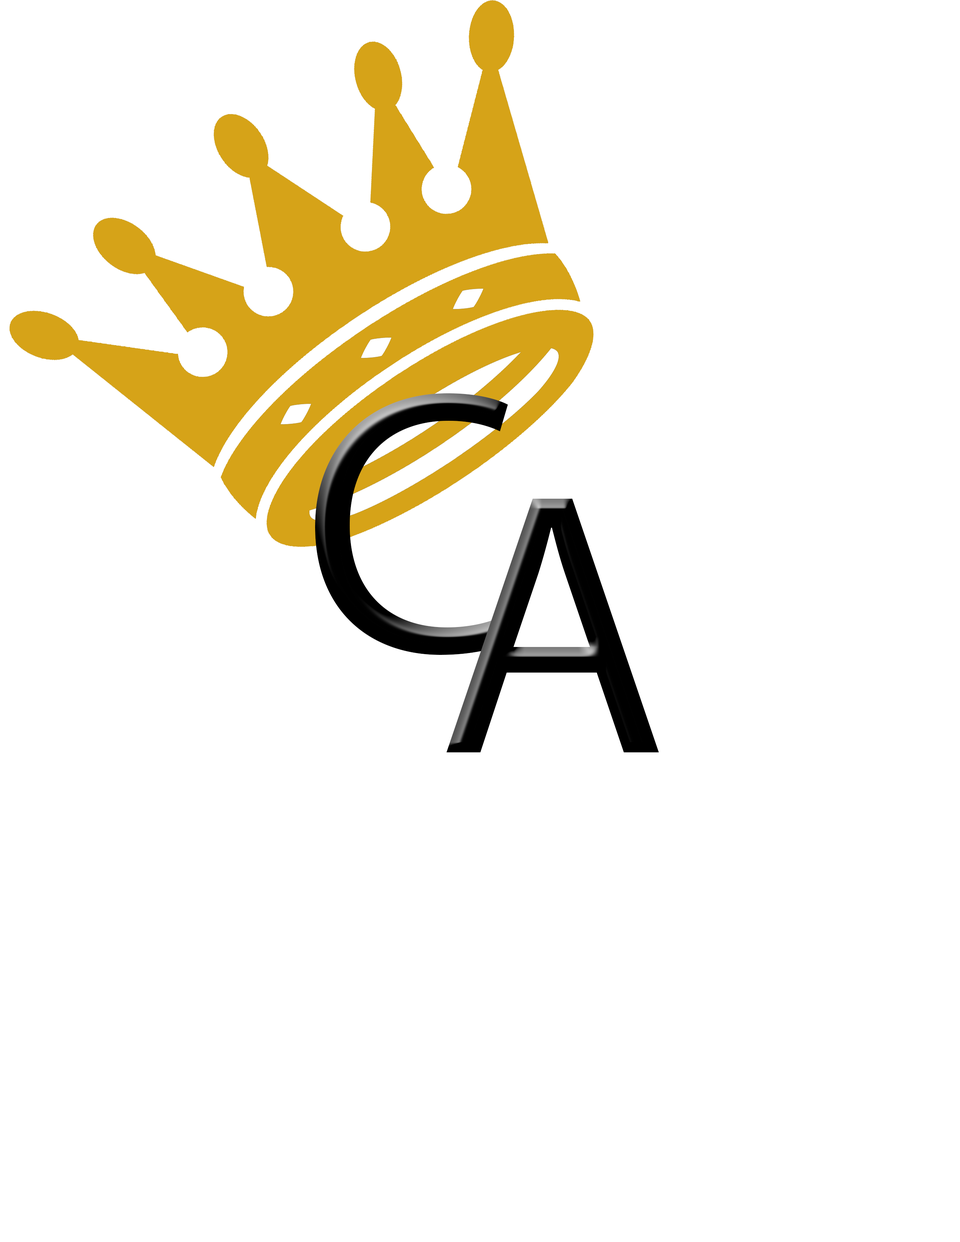
<style>
.page{position:relative;width:960px;height:1242px;background:#ffffff}
.page>*{position:absolute;margin:0}
.t1{font:376.4px "MyriadPro-Regular";color:#000000}
</style>
<div class="page">
<p class="t1" style="left:315px;top:393px;width:193px;height:262px">C</p>
<p class="t1" style="left:446px;top:499px;width:213px;height:253px">A</p>
</div>
